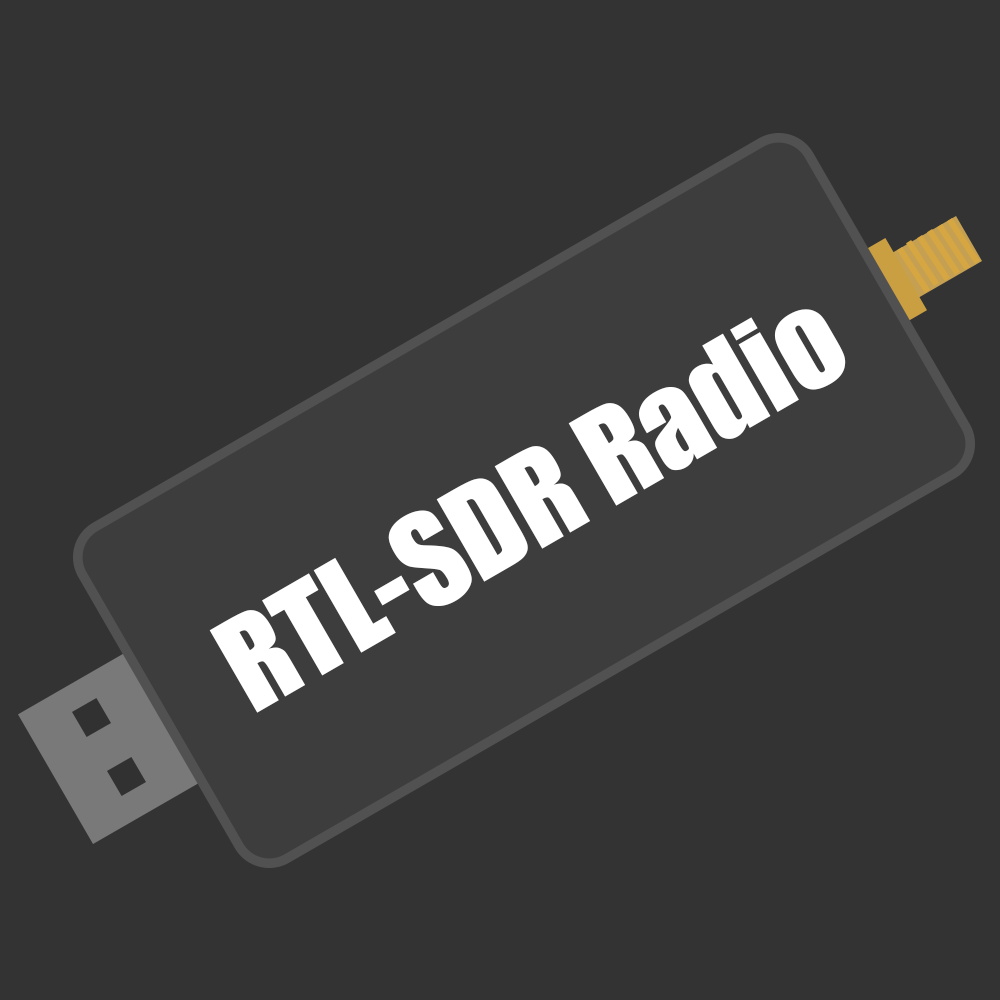
<style>
.page{position:relative;width:1000px;height:1000px;background:#333333}
.page>*{position:absolute;margin:0}
.t1{font:120px "Impact";color:#ffffff}
</style>
<div class="page">
<p class="t1" style="left:209px;top:309px;width:637px;height:404px;rotate:-30deg">RTL-SDR Radio</p>
</div>
